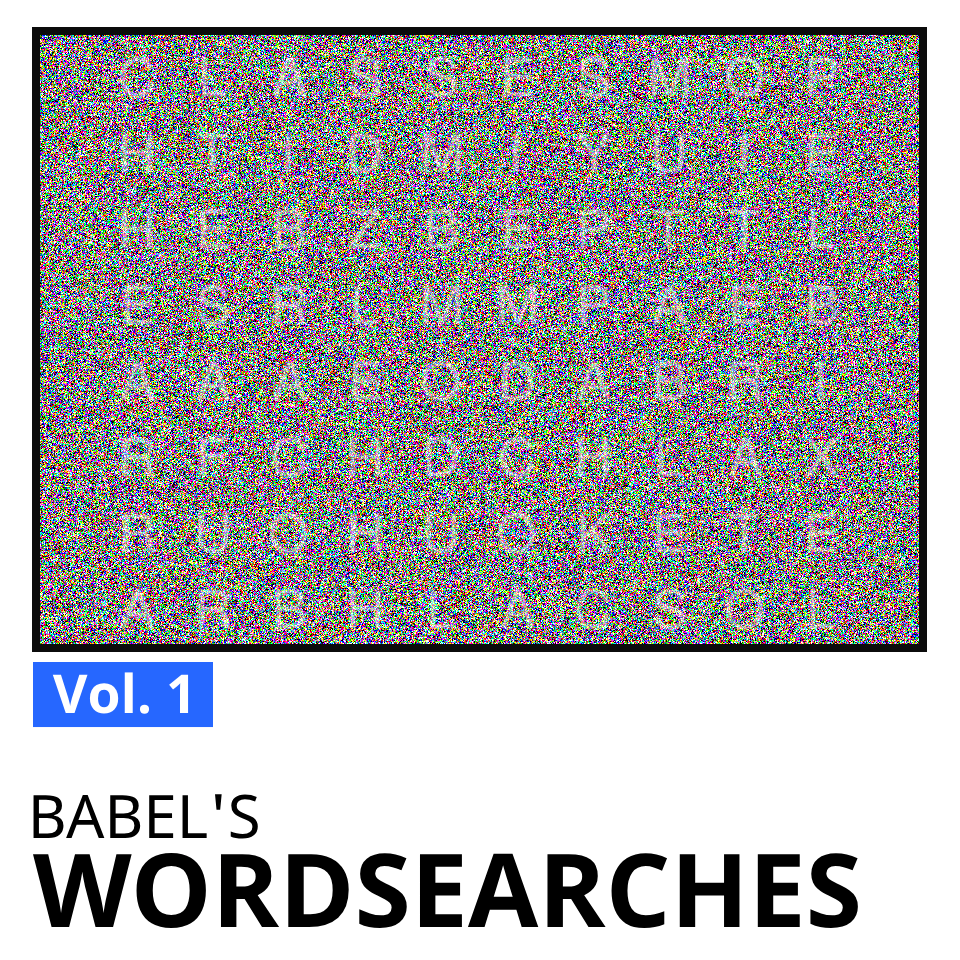
<style>
.page{position:relative;width:960px;height:960px;background:#ffffff}
.page>*{position:absolute;margin:0}
.t1{font:53.4px "OpenSans-Bold";color:#ffffff}
.t2{font:60px "NotoSans";color:#000000}
.t3{font:102px "NotoSans-Bold";color:#000000}
</style>
<div class="page">
<p class="t1" style="left:52px;top:672px;width:137px;height:42px">Vol. 1</p>
<p class="t2" style="left:33px;top:794px;width:225px;height:45px">BABEL'S</p>
<p class="t3" style="left:33px;top:853px;width:825px;height:76px">WORDSEARCHES</p>
</div>
